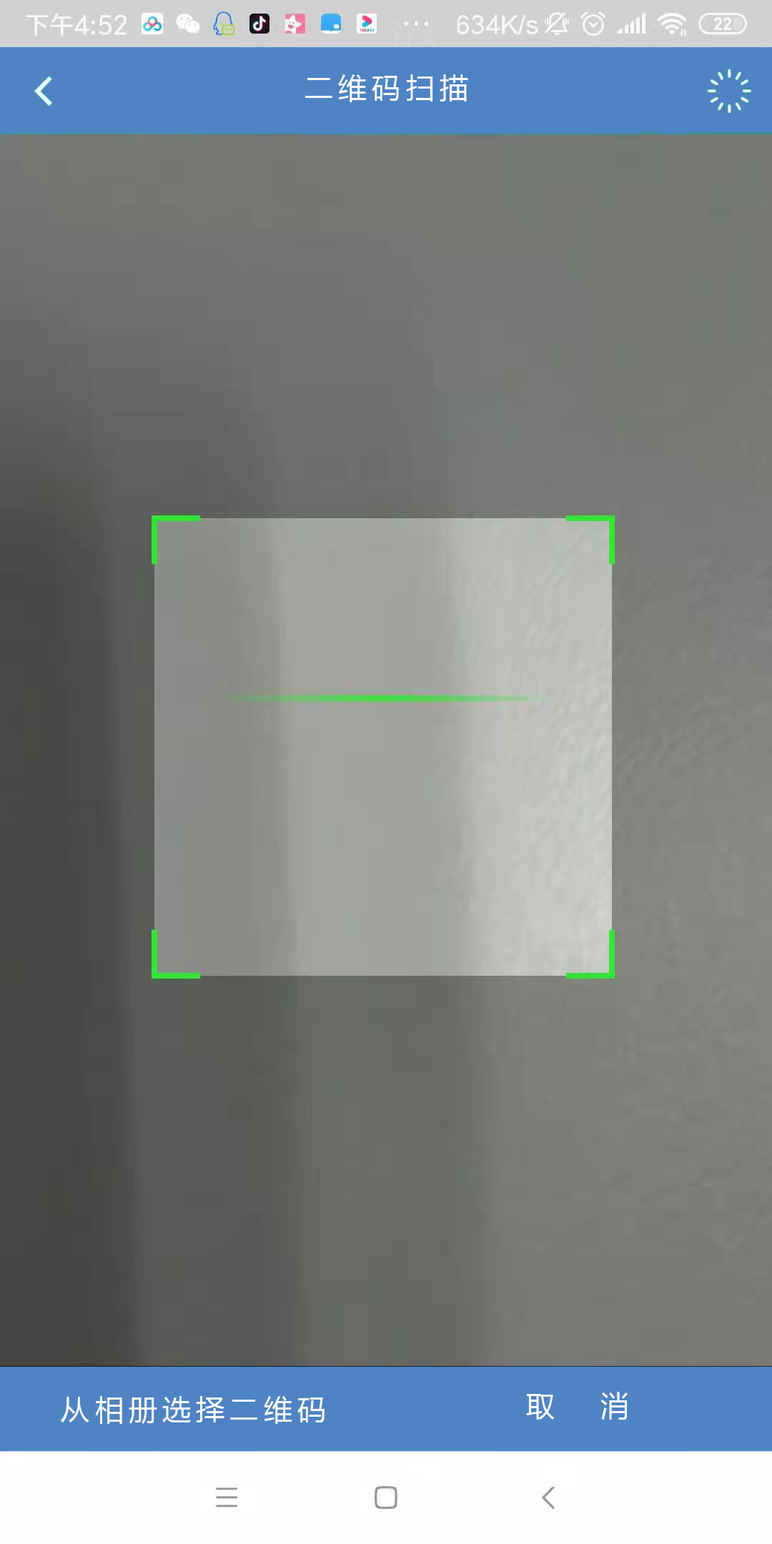
<style>
.page{position:relative;width:772px;height:1544px}
.page>*{position:absolute;margin:0}
.t1{font:28.6px "MicrosoftYaHei";letter-spacing:0.18em;color:#ffffff}
</style>
<div class="page">
<p class="t1" style="left:61px;top:1396px;width:264px;height:28px">从相册选择二维码</p>
<p class="t1" style="left:526px;top:1392px;width:102px;height:28px">取   消</p>
</div>
